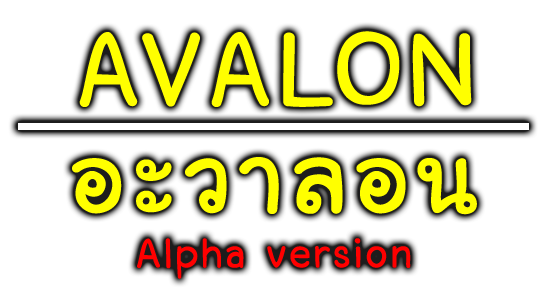
<style>
.page{position:relative;width:556px;height:300px;background:#ffffff}
.page>*{position:absolute;margin:0}
.t1{font:145.6px "LayijiMaHaNiYomV1.5";letter-spacing:0.01em;color:#ffff00;font-weight:bold}
.t2{font:57.5px "LayijiMaHaNiYomV1.5";letter-spacing:0.01em;color:#ff0000;font-weight:bold}
</style>
<div class="page">
<p class="t1" style="left:79px;top:31px;width:393px;height:76px">AVALON</p>
<p class="t1" style="left:72px;top:157px;width:405px;height:58px">อะวาลอน</p>
<p class="t2" style="left:137px;top:238px;width:274px;height:41px">Alpha version</p>
</div>
